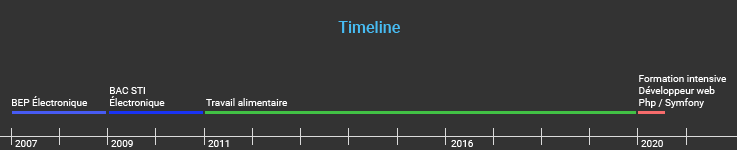
<style>
.page{position:relative;width:737px;height:150px;background:#333333}
.page>*{position:absolute;margin:0}
.t1{font:16px "Roboto-Medium";color:#47bdf4}
.t2{font:10px "Roboto-Regular";color:#ffffff}
</style>
<div class="page">
<p class="t1" style="left:338px;top:21px;width:62px;height:12px">Timeline</p>
<p class="t2" style="left:639px;top:75px;width:88px;height:33px">Formation intensive<br>Développeur web<br>Php / Symfony</p>
<p class="t2" style="left:110px;top:87px;width:55px;height:21px">BAC STI<br>Électronique</p>
<p class="t2" style="left:12px;top:96px;width:76px;height:12px">BEP Électronique</p>
<p class="t2" style="left:206px;top:98px;width:82px;height:8px">Travail alimentaire</p>
<p class="t2" style="left:15px;top:140px;width:23px;height:7px">2007</p>
<p class="t2" style="left:111px;top:140px;width:22px;height:7px">2009</p>
<p class="t2" style="left:208px;top:140px;width:21px;height:7px">2011</p>
<p class="t2" style="left:451px;top:140px;width:22px;height:7px">2016</p>
<p class="t2" style="left:641px;top:140px;width:22px;height:7px">2020</p>
</div>
